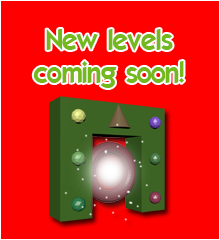
<style>
.page{position:relative;width:220px;height:240px;background:#ff0000}
.page>*{position:absolute;margin:0}
.t1{font:28px "ELEGANCE";color:#74b81d}
</style>
<div class="page">
<p class="t1" style="left:33px;top:29px;width:151px;height:59px;text-align:center">New levels<br>coming soon!</p>
</div>
